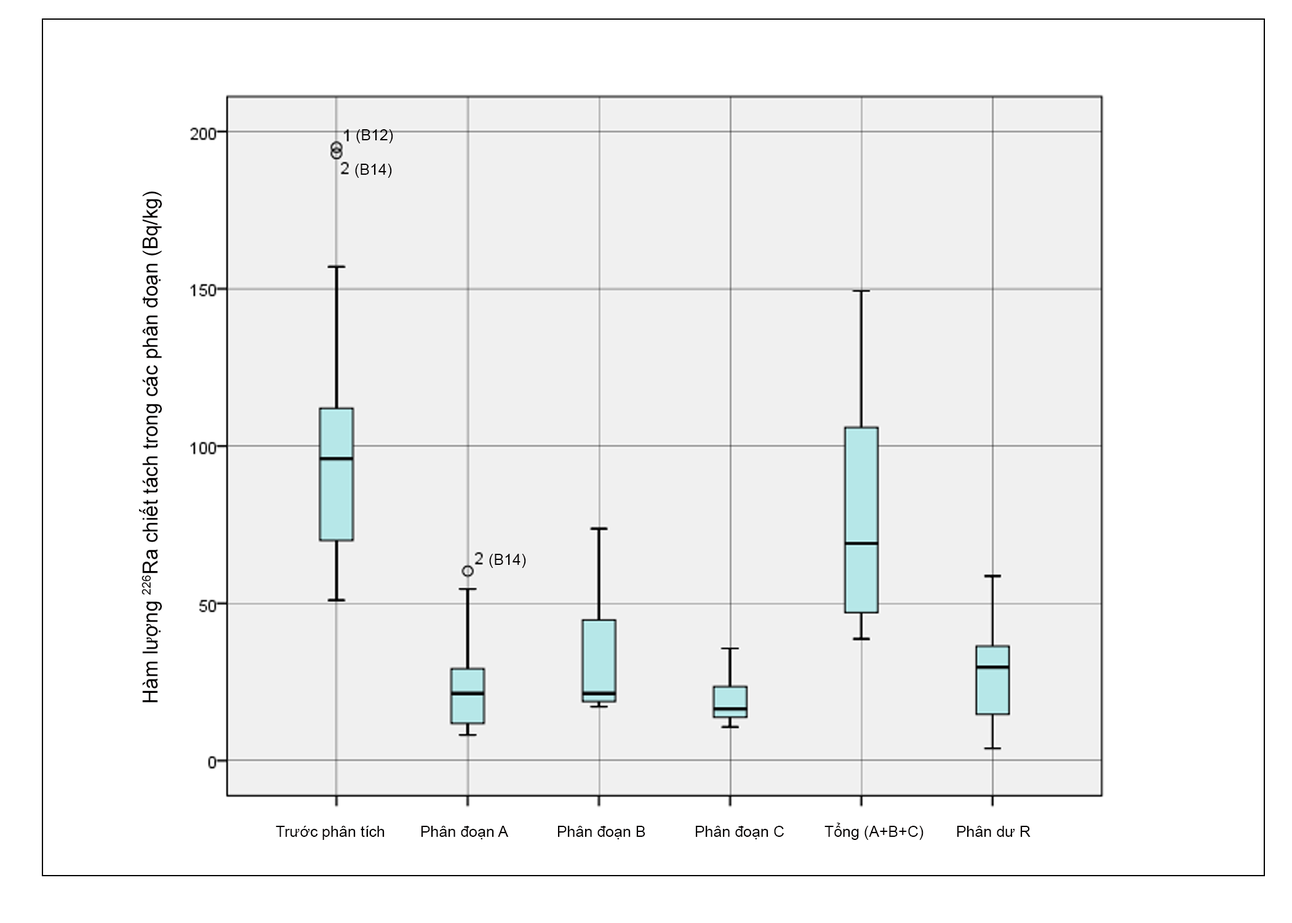
<style>
.page{position:relative;width:1292px;height:923px;background:#f0f0f0}
.page>*{position:absolute;margin:0}
.t1{font:15.4px "ArialMT";color:#030000}
.t2{font:20.7px "ArialMT";color:#030000}
</style>
<div class="page">
<p class="t1" style="left:356px;top:129px;width:37px;height:14px">(B12)</p>
<p class="t1" style="left:355px;top:164px;width:37px;height:14px">(B14)</p>
<p class="t2" style="left:139px;top:191px;width:23px;height:512px;rotate:-90deg">Hàm lượng 226Ra chiết tách trong các phân đoạn (Bq/kg)</p>
<p class="t1" style="left:489px;top:554px;width:37px;height:14px">(B14)</p>
<p class="t1" style="left:276px;top:826px;width:109px;height:14px">Trước phân tích</p>
<p class="t1" style="left:421px;top:826px;width:88px;height:13px">Phân đoạn A</p>
<p class="t1" style="left:558px;top:826px;width:87px;height:13px">Phân đoạn B</p>
<p class="t1" style="left:696px;top:826px;width:88px;height:13px">Phân đoạn C</p>
<p class="t1" style="left:824px;top:823px;width:100px;height:17px">Tổng (A+B+C)</p>
<p class="t1" style="left:957px;top:826px;width:74px;height:11px">Phân dư R</p>
</div>
